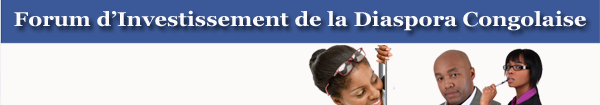
<style>
.page{position:relative;width:600px;height:105px;background:#fcf9f9}
.page>*{position:absolute;margin:0}
.t1{font:20px "Georgia-Bold";color:#faf9fb;scale:1.1 1}
</style>
<div class="page">
<p class="t1" style="left:14px;top:10px;width:572px;height:21px">Forum d’Investissement de la Diaspora Congolaise</p>
</div>
